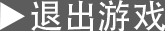
<style>
.page{position:relative;width:165px;height:31px;background:#5c5c5c}
.page>*{position:absolute;margin:0}
.t1{font:34.2px "AdobeHeitiStd-Regular";color:#ffffff}
</style>
<div class="page">
<p class="t1" style="left:31px;top:0px;width:135px;height:32px">退出游戏</p>
</div>
